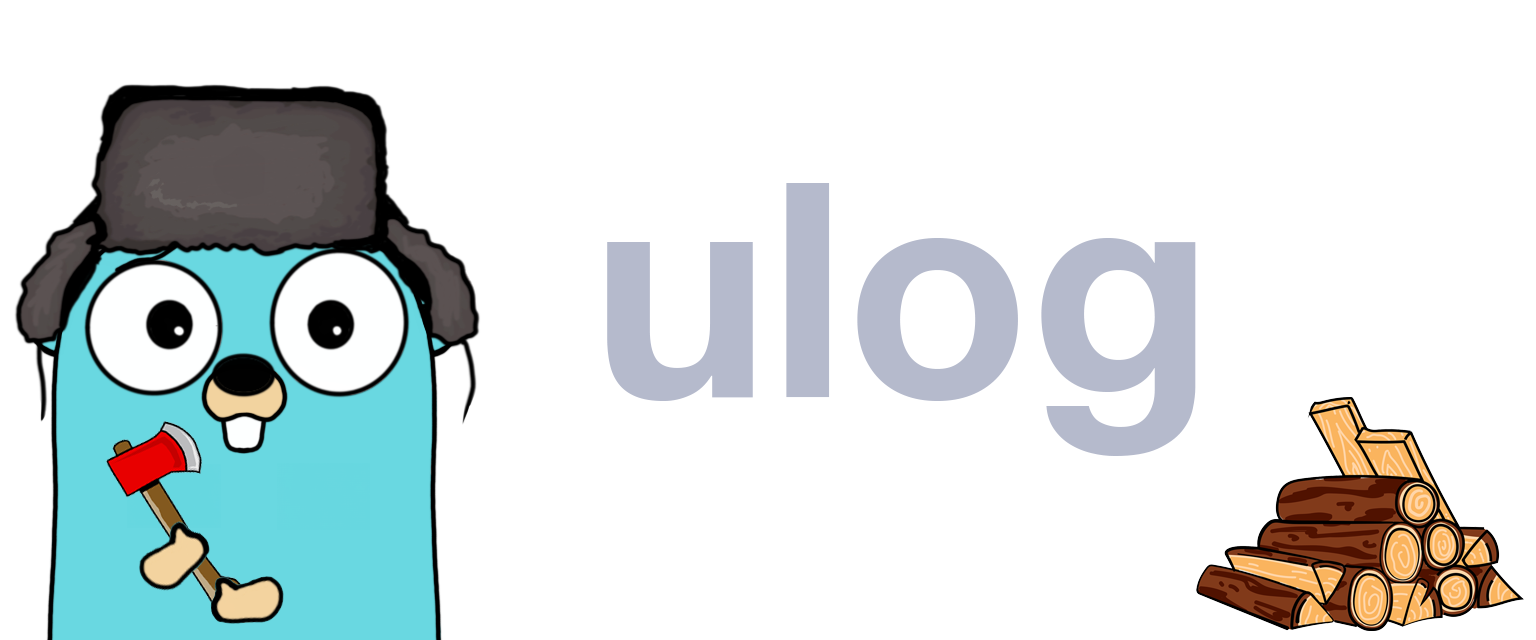
<style>
.page{position:relative;width:1536px;height:640px;background:#ffffff}
.page>*{position:absolute;margin:0}
.t1{font:300px "HelveticaNeue-Bold";color:#b5bacc}
</style>
<div class="page">
<p class="t1" style="left:607px;top:183px;width:589px;height:273px">ulog</p>
</div>
